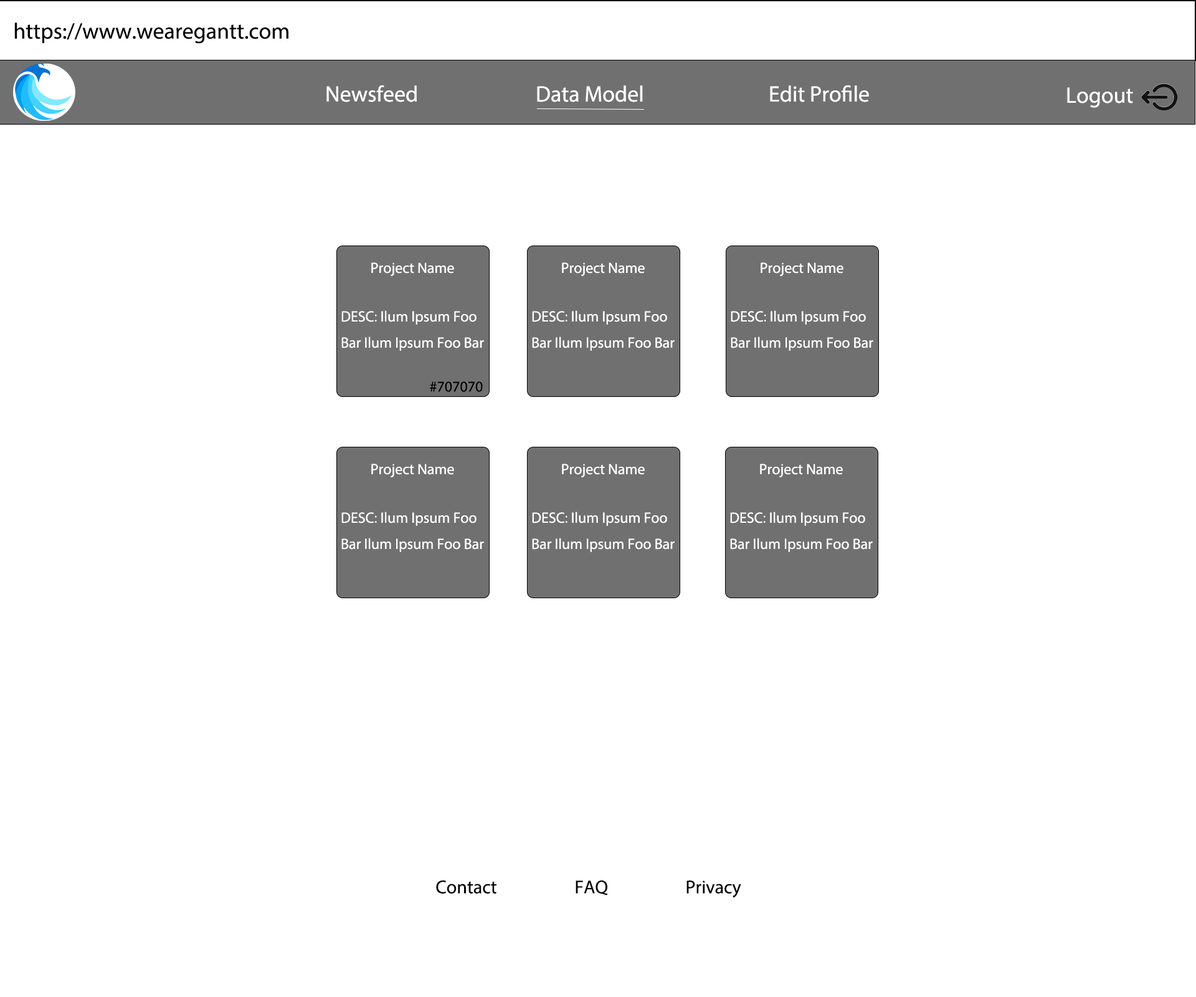
<style>
.page{position:relative;width:1196px;height:997px;background:#ffffff}
.page>*{position:absolute;margin:0}
.t1{font:22.4px "MyriadPro-Regular";color:#000000}
.t2{font:22.4px "MyriadPro-Regular";color:#ffffff}
.t3{font:15px "MyriadPro-Regular";color:#ffffff}
.t4{font:15px "MyriadPro-Regular";color:#000000}
.t5{font:18.7px "MyriadPro-Regular";color:#000000}
</style>
<div class="page">
<p class="t1" style="left:14px;top:22px;width:274px;height:22px">https://www.wearegantt.com</p>
<p class="t2" style="left:326px;top:85px;width:91px;height:17px">Newsfeed</p>
<p class="t2" style="left:537px;top:85px;width:106px;height:17px">Data Model</p>
<p class="t2" style="left:770px;top:85px;width:99px;height:17px">Edit Profile</p>
<p class="t2" style="left:1067px;top:87px;width:66px;height:21px">Logout</p>
<p class="t3" style="left:371px;top:262px;width:83px;height:14px">Project Name</p>
<p class="t3" style="left:562px;top:262px;width:83px;height:14px">Project Name</p>
<p class="t3" style="left:761px;top:262px;width:83px;height:14px">Project Name</p>
<p class="t3" style="left:341px;top:310px;width:143px;height:41px">DESC: Ilum Ipsum Foo <br>Bar Ilum Ipsum Foo Bar</p>
<p class="t3" style="left:532px;top:310px;width:143px;height:41px">DESC: Ilum Ipsum Foo <br>Bar Ilum Ipsum Foo Bar</p>
<p class="t3" style="left:731px;top:310px;width:142px;height:41px">DESC: Ilum Ipsum Foo <br>Bar Ilum Ipsum Foo Bar</p>
<p class="t4" style="left:430px;top:381px;width:53px;height:11px">#707070</p>
<p class="t3" style="left:371px;top:464px;width:83px;height:13px">Project Name</p>
<p class="t3" style="left:562px;top:464px;width:83px;height:13px">Project Name</p>
<p class="t3" style="left:760px;top:464px;width:83px;height:13px">Project Name</p>
<p class="t3" style="left:341px;top:512px;width:143px;height:40px">DESC: Ilum Ipsum Foo <br>Bar Ilum Ipsum Foo Bar</p>
<p class="t3" style="left:532px;top:512px;width:143px;height:40px">DESC: Ilum Ipsum Foo <br>Bar Ilum Ipsum Foo Bar</p>
<p class="t3" style="left:730px;top:512px;width:143px;height:40px">DESC: Ilum Ipsum Foo <br>Bar Ilum Ipsum Foo Bar</p>
<p class="t5" style="left:436px;top:880px;width:61px;height:13px">Contact</p>
<p class="t5" style="left:576px;top:880px;width:32px;height:15px">FAQ</p>
<p class="t5" style="left:687px;top:880px;width:54px;height:18px">Privacy</p>
</div>
